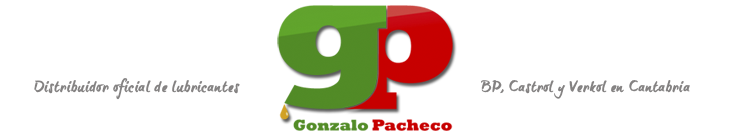
<style>
.page{position:relative;width:731px;height:136px;background:#ffffff}
.page>*{position:absolute;margin:0}
.t1{font:13.9px "brush-tipTerrence";color:#848282;font-weight:bold}
</style>
<div class="page">
<p class="t1" style="left:34px;top:78px;width:656px;height:22px">Distribuidor oficial de lubricantes                                                      BP, Castrol y Verkol en Cantabria</p>
</div>
